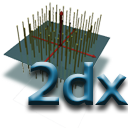
<style>
.page{position:relative;width:128px;height:128px;background:#ffffff}
.page>*{position:absolute;margin:0}
.t1{font:56.8px "GadgetRegular"}
</style>
<div class="page">
<p class="t1" style="left:28px;top:61px;width:101px;height:45px">2dx</p>
</div>
